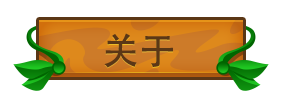
<style>
.page{position:relative;width:287px;height:103px;background:#ffffff}
.page>*{position:absolute;margin:0}
.t1{font:36px "AdobeHeitiStd-Regular";letter-spacing:0.025em;color:#5b3716}
</style>
<div class="page">
<p class="t1" style="left:104px;top:33px;width:69px;height:35px">关于</p>
</div>
